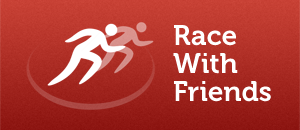
<style>
.page{position:relative;width:300px;height:130px}
.page>*{position:absolute;margin:0}
.t1{font:28px/28px "Museo-700";color:#ffffff}
</style>
<div class="page">
<p class="t1" style="left:173px;top:25px;width:98px;height:77px">Race <br>With <br>Friends</p>
</div>
